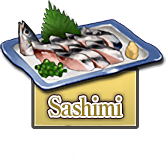
<style>
.page{position:relative;width:166px;height:159px;background:#ffffff}
.page>*{position:absolute;margin:0}
.t1{font:25px "RyuminPro-ExBold";letter-spacing:-0.08em;color:#8d7215;scale:0.9 1}
</style>
<div class="page">
<p class="t1" style="left:49px;top:97px;width:73px;height:20px">Sashimi</p>
</div>
